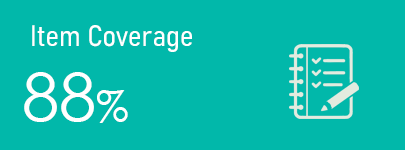
<style>
.page{position:relative;width:405px;height:150px;background:#01b8aa}
.page>*{position:absolute;margin:0}
.t1{font:29.2px "Bahnschrift-SemiLightSemiCondensed";color:#ffffff}
.t2{font:66.7px "CenturyGothic";color:#ffffff}
.t3{font:41.7px "CenturyGothic";color:#ffffff}
</style>
<div class="page">
<p class="t1" style="left:32px;top:25px;width:160px;height:27px">Item Coverage</p>
<p class="t2" style="left:24px;top:72px;width:104px;height:51px">88<span class="t3">%</span></p>
</div>
